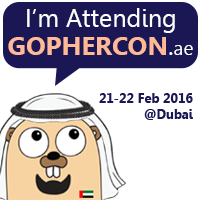
<style>
.page{position:relative;width:200px;height:200px;background:#ffffff}
.page>*{position:absolute;margin:0}
.t1{font:25.3px "Leelawadee";color:#ffffff}
.t2{font:26px "Leelawadee-Bold";color:#ffb997}
.t3{font:26px "Leelawadee";color:#ffffff}
.t4{font:19.5px "Leelawadee";color:#ffffff}
.t5{font:13px "Leelawadee-Bold";color:#1b1754}
</style>
<div class="page">
<p class="t1" style="left:27px;top:8px;width:148px;height:25px">I’m Attending</p>
<p class="t2" style="left:8px;top:37px;width:185px;height:18px">GOPHERCON<span class="t3">.</span><span class="t4">ae</span></p>
<p class="t5" style="left:99px;top:93px;width:94px;height:27px;text-align:right">21-22 Feb 2016<br>            @Dubai</p>
</div>
